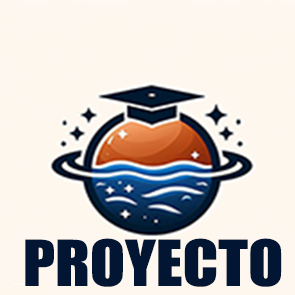
<style>
.page{position:relative;width:295px;height:295px;background:#fef7ed}
.page>*{position:absolute;margin:0}
.t1{font:58.3px "Impact";color:#021634;scale:1.11 1}
</style>
<div class="page">
<p class="t1" style="left:25px;top:238px;width:257px;height:49px">PROYECTO</p>
</div>
